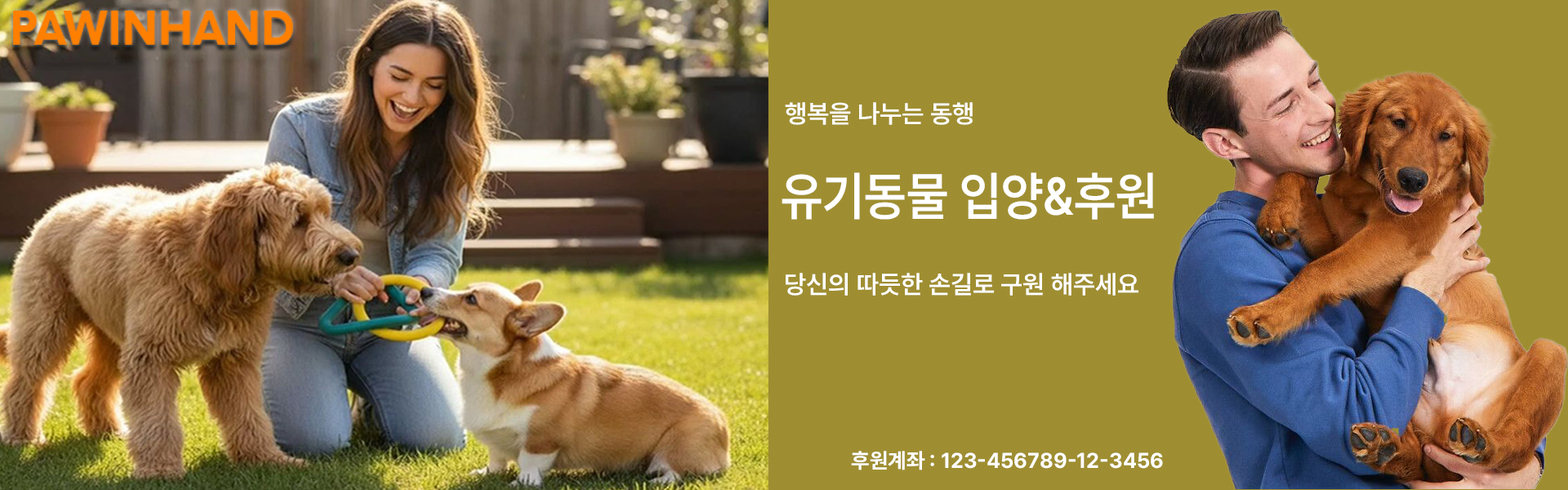
<style>
.page{position:relative;width:1568px;height:490px;background:#9f8e31}
.page>*{position:absolute;margin:0}
.t1{font:25.3px "Pretendard-SemiBold";color:#ffffff}
.t2{font:52.8px "Pretendard-SemiBold";color:#ffffff;scale:0.92 1}
.t3{font:21.2px "Pretendard-Bold";color:#ffffff}
</style>
<div class="page">
<p class="t1" style="left:785px;top:102px;width:188px;height:23px">행복을 나누는 동행</p>
<p class="t2" style="left:782px;top:172px;width:372px;height:48px">유기동물 입양&amp;후원</p>
<p class="t1" style="left:786px;top:273px;width:352px;height:23px">당신의 따듯한 손길로 구원 해주세요</p>
<p class="t3" style="left:851px;top:451px;width:312px;height:19px">후원계좌 : 123-456789-12-3456</p>
</div>
